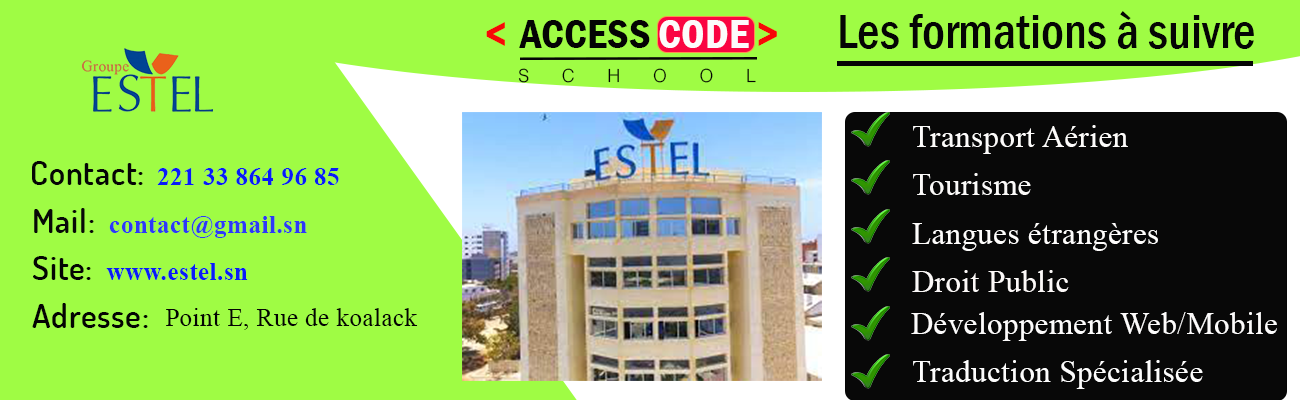
<style>
.page{position:relative;width:1300px;height:400px;background:#9ffc44}
.page>*{position:absolute;margin:0}
.t1{font:50px "FranklinGothic-MediumCond";color:#050505}
.t2{font:18.1px "Helvetica-Light";letter-spacing:1.79em;color:#040404}
.t3{font:30.6px "TimesNewRomanPSMT";letter-spacing:0.02em;color:#fdfcfb}
.t4{font:33.3px "Dosis-SemiBold";letter-spacing:0.02em;color:#060606}
.t5{font:25px "TimesNewRomanPS-BoldMT";letter-spacing:0.02em;color:#091af8}
.t6{font:30.6px "TimesNewRomanPSMT";letter-spacing:0.02em;color:#fbfaf9}
.t7{font:33.3px "Dosis-SemiBold";letter-spacing:0.02em;color:#080808}
.t8{font:25px "TimesNewRomanPS-BoldMT";letter-spacing:0.02em;color:#2e38f8}
.t9{font:30.6px "TimesNewRomanPSMT";letter-spacing:0.02em;color:#fefdfc}
.t10{font:33.3px "Dosis-SemiBold";letter-spacing:0.02em;color:#040404}
.t11{font:30.6px "TimesNewRomanPSMT";letter-spacing:0.02em;color:#fcf9f8}
.t12{font:25px "TimesNewRomanPSMT";letter-spacing:0.02em;color:#040404}
.t13{font:30.6px "TimesNewRomanPSMT";letter-spacing:0.02em;color:#fdfcfc}
.t14{font:30.6px "TimesNewRomanPSMT";letter-spacing:0.02em;color:#fdfdfd}
</style>
<div class="page">
<p class="t1" style="left:840px;top:11px;width:414px;height:38px">Les formations à suivre</p>
<p class="t2" style="left:518px;top:68px;width:238px;height:15px">SCHOOL</p>
<p class="t3" style="left:913px;top:125px;width:215px;height:29px">Transport Aérien</p>
<p class="t4" style="left:32px;top:161px;width:111px;height:24px">Contact:</p>
<p class="t5" style="left:157px;top:168px;width:182px;height:17px">221 33 864 96 85</p>
<p class="t6" style="left:913px;top:173px;width:118px;height:22px">Tourisme</p>
<p class="t7" style="left:34px;top:208px;width:60px;height:25px">Mail:</p>
<p class="t8" style="left:109px;top:216px;width:198px;height:22px">contact@gmail.sn</p>
<p class="t9" style="left:912px;top:223px;width:246px;height:28px">Langues étrangères</p>
<p class="t10" style="left:33px;top:256px;width:58px;height:24px">Site:</p>
<p class="t5" style="left:106px;top:263px;width:142px;height:17px">www.estel.sn</p>
<p class="t11" style="left:912px;top:270px;width:157px;height:22px">Droit Public</p>
<p class="t10" style="left:32px;top:303px;width:116px;height:25px">Adresse:</p>
<p class="t12" style="left:166px;top:308px;width:252px;height:22px">Point E, Rue de koalack</p>
<p class="t13" style="left:911px;top:312px;width:366px;height:29px">Développement Web/Mobile</p>
<p class="t14" style="left:913px;top:360px;width:290px;height:29px">Traduction Spécialisée</p>
</div>
